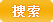
<style>
.page{position:relative;width:53px;height:22px}
.page>*{position:absolute;margin:0}
.t1{font:13px "NSimSun";color:#ffffff;font-weight:bold}
</style>
<div class="page">
<p class="t1" style="left:12px;top:5px;width:28px;height:12px">搜索</p>
</div>
